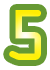
<style>
.page{position:relative;width:50px;height:70px;background:#669933}
.page>*{position:absolute;margin:0}
.t1{font:64px "OCRAStd"}
</style>
<div class="page">
<p class="t1" style="left:9px;top:10px;width:32px;height:50px">5</p>
</div>
